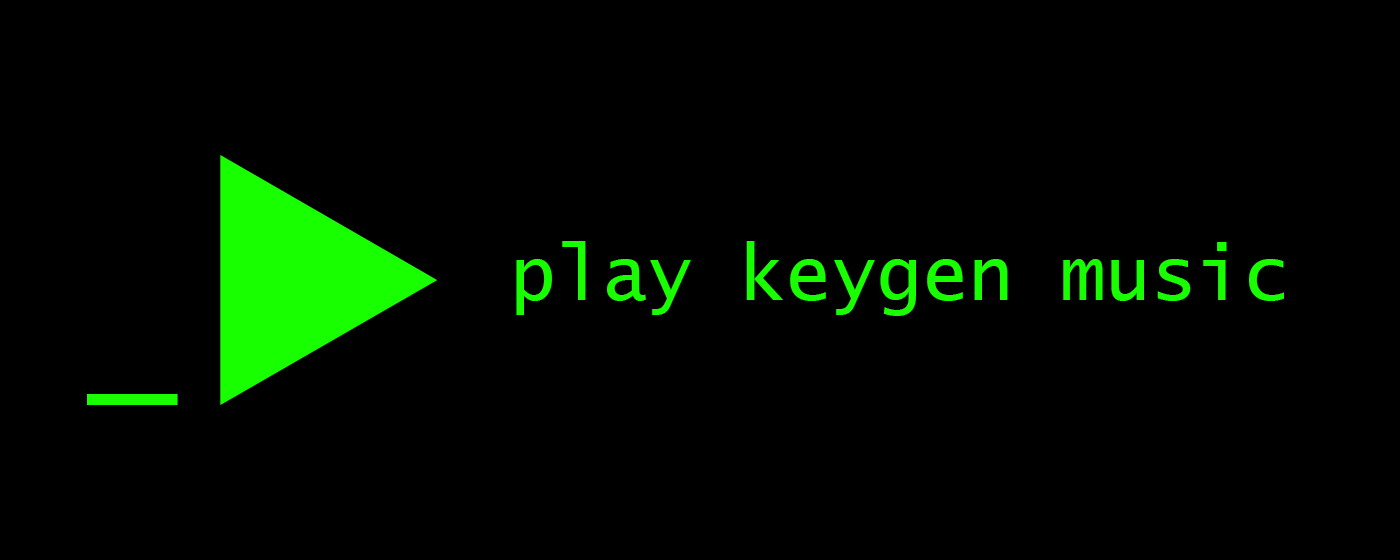
<style>
.page{position:relative;width:1400px;height:560px;background:#000000}
.page>*{position:absolute;margin:0}
.t1{font:76px "LucidaConsole";color:#18ff00}
.t2{font:150px "LucidaConsole";color:#18ff00}
</style>
<div class="page">
<p class="t1" style="left:516px;top:241px;width:768px;height:75px">play keygen music</p>
<p class="t2" style="left:87px;top:394px;width:91px;height:11px">_</p>
</div>
